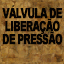
<style>
.page{position:relative;width:64px;height:64px;background:#050302}
.page>*{position:absolute;margin:0}
.t1{font:14px/13px "Arial-Black";letter-spacing:-0.09em;color:#050302;text-transform:uppercase;font-weight:bold;scale:0.66 1}
</style>
<div class="page">
<p class="t1" style="left:2px;top:5px;width:61px;height:40px;text-align:center">Válvula de<br>liberação<br>de pressão</p>
</div>
